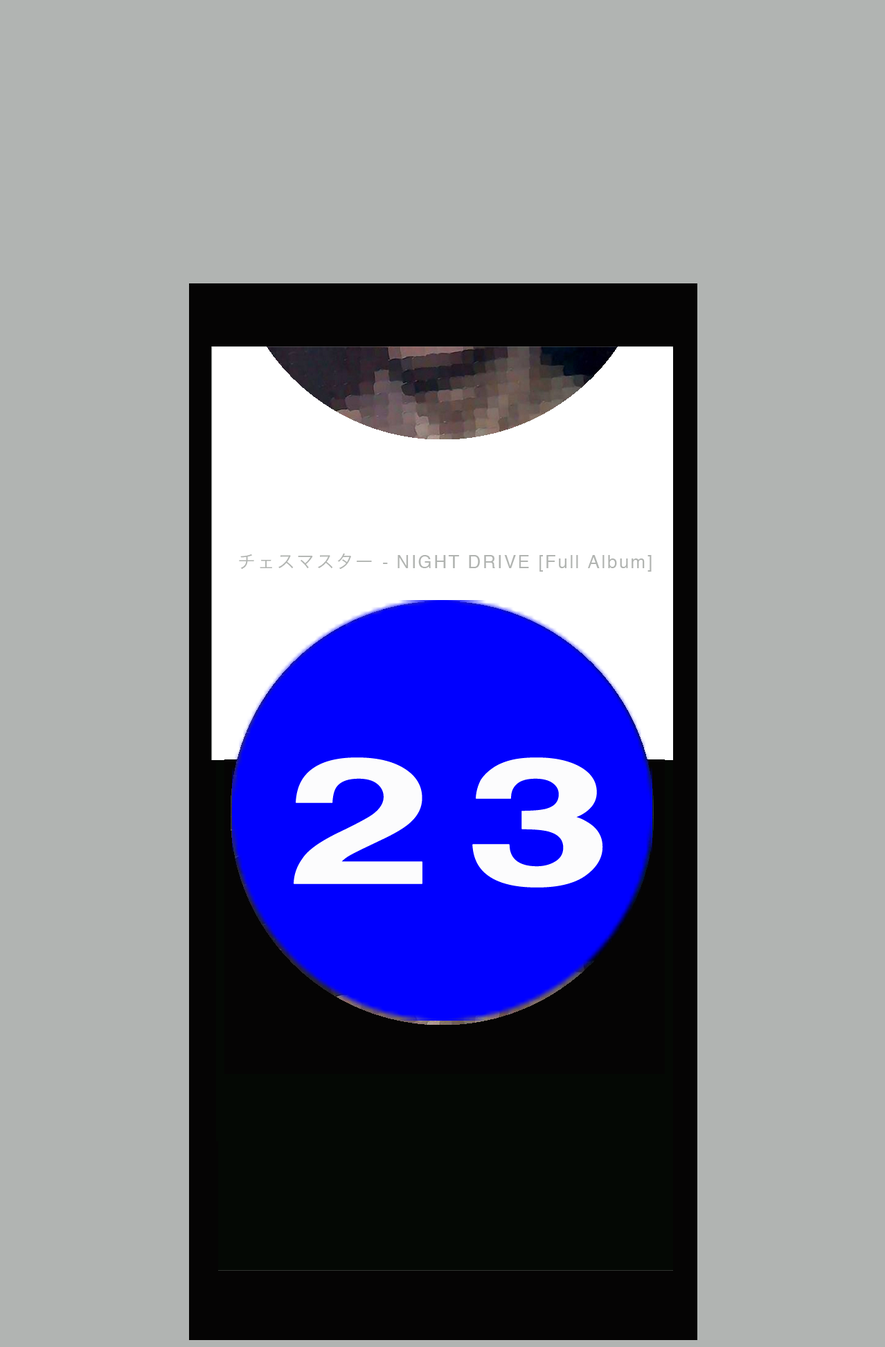
<style>
.page{position:relative;width:885px;height:1347px;background:#b1b4b2}
.page>*{position:absolute;margin:0}
.t1{font:17.9px "Helvetica";letter-spacing:0.1em;color:#b1b4b1}
.t2{font:17.9px "HiraKakuProN-W3";letter-spacing:0.1em;color:#b1b4b1}
.t3{font:175.7px "Helvetica-Bold";letter-spacing:0.1em;color:#fcfcfd;font-weight:bold;scale:1.5 1}
</style>
<div class="page">
<p class="t1" style="left:239px;top:553px;width:413px;height:19px"><span class="t2">チェスマスター</span> - NIGHT DRIVE [Full Album]</p>
<p class="t3" style="left:294px;top:757px;width:309px;height:130px">23</p>
</div>
